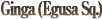
<style>
.page{position:relative;width:102px;height:19px;background:#ffffff}
.page>*{position:absolute;margin:0}
.t1{font:18px "RyuminPro-ExBold";letter-spacing:-0.11em;color:#4a3f32;font-weight:bold;scale:0.8 1}
</style>
<div class="page">
<p class="t1" style="left:1px;top:1px;width:102px;height:18px">Ginga (Egusa Sq.)</p>
</div>
